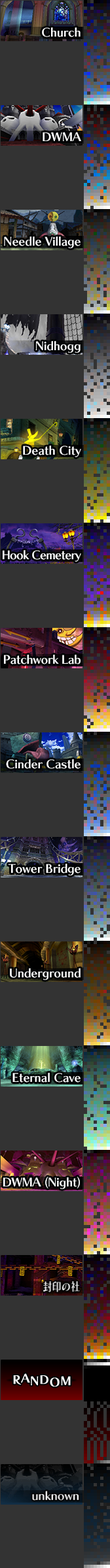
<style>
.page{position:relative;width:110px;height:1568px;background:#333333}
.page>*{position:absolute;margin:0}
.t1{font:11.8px/104.5px "ChiaroStd-B";letter-spacing:-0.01em;color:#ffffff}
.t2{font:11.8px/104.5px "ChiaroStd-B";letter-spacing:-0.05em;color:#ffffff}
.t3{font:11.8px/104.5px "ChiaroStd-B";letter-spacing:-0.025em;color:#ffffff}
</style>
<div class="page">
<p class="t1" style="left:3px;top:27px;width:78px;height:1162px;text-align:right">Church<br>DWMA<br>Needle Village<br>Nidhogg<br>Death City<br><span class="t2">Hook Cemetery<br></span><span class="t3">Patchwork Lab<br></span>Cinder Castle<br>Tower Bridge<br>Underground<br>Eternal Cave<br><span class="t3">DWMA </span><span class="t2">(</span><span class="t3">N</span>ig<span class="t3">h</span><span class="t2">t)</span></p>
</div>
